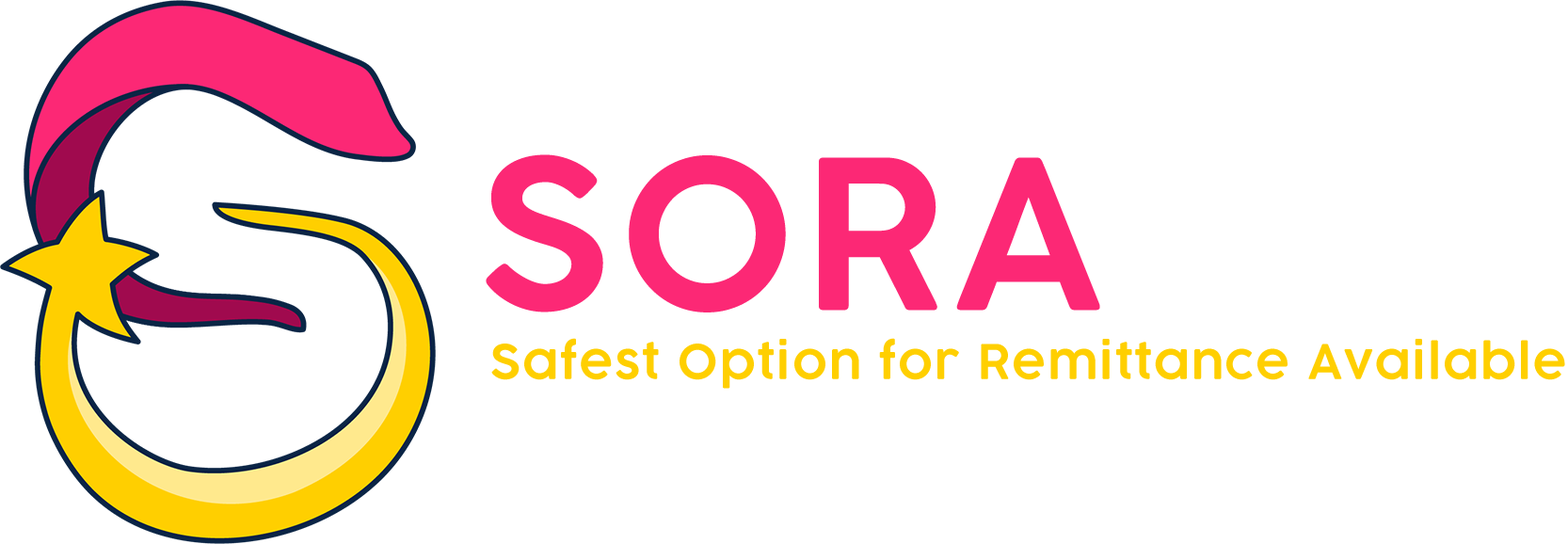
<style>
.page{position:relative;width:1568px;height:544px;background:#ffffff}
.page>*{position:absolute;margin:0}
.t1{font:205.2px "COCOGOOSE-DemiBold";letter-spacing:0.03em;color:#fc2875}
.t2{font:47.1px "COCOGOOSE-DemiBold";letter-spacing:0.03em;color:#ffcf00}
</style>
<div class="page">
<p class="t1" style="left:486px;top:154px;width:614px;height:158px">SORA</p>
<p class="t2" style="left:491px;top:338px;width:1074px;height:51px">Safest Option for Remittance Available</p>
</div>
